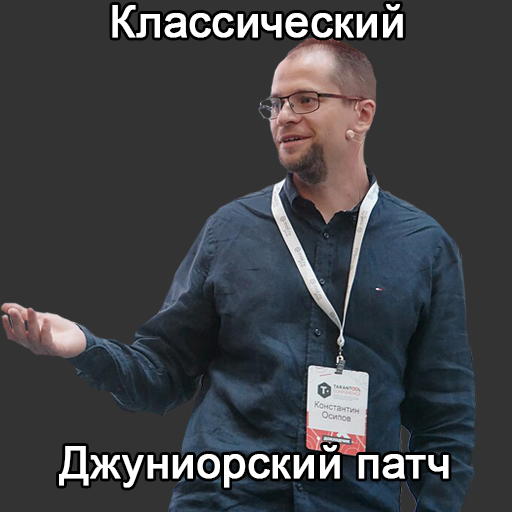
<style>
.page{position:relative;width:512px;height:512px;background:#333333}
.page>*{position:absolute;margin:0}
.t1{font:44px "ArialMT";color:#ffffff;font-weight:bold}
</style>
<div class="page">
<p class="t1" style="left:112px;top:4px;width:291px;height:34px">Классический</p>
<p class="t1" style="left:59px;top:445px;width:390px;height:43px">Джуниорский патч</p>
</div>
